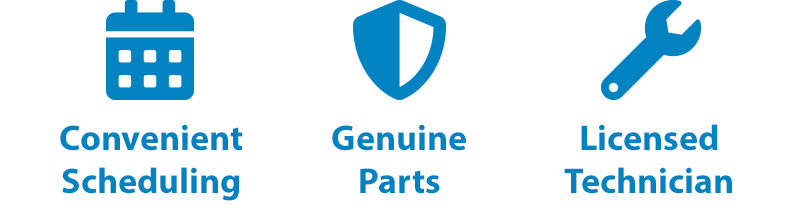
<style>
.page{position:relative;width:800px;height:210px;background:#ffffff}
.page>*{position:absolute;margin:0}
.t1{font:36px "MyriadPro-Bold";color:#0083c0}
</style>
<div class="page">
<p class="t1" style="left:60px;top:124px;width:183px;height:77px;text-align:center">Convenient<br>Scheduling</p>
<p class="t1" style="left:332px;top:124px;width:134px;height:70px;text-align:center">Genuine<br>Parts</p>
<p class="t1" style="left:564px;top:124px;width:168px;height:70px;text-align:center">Licensed<br>Technician</p>
</div>
